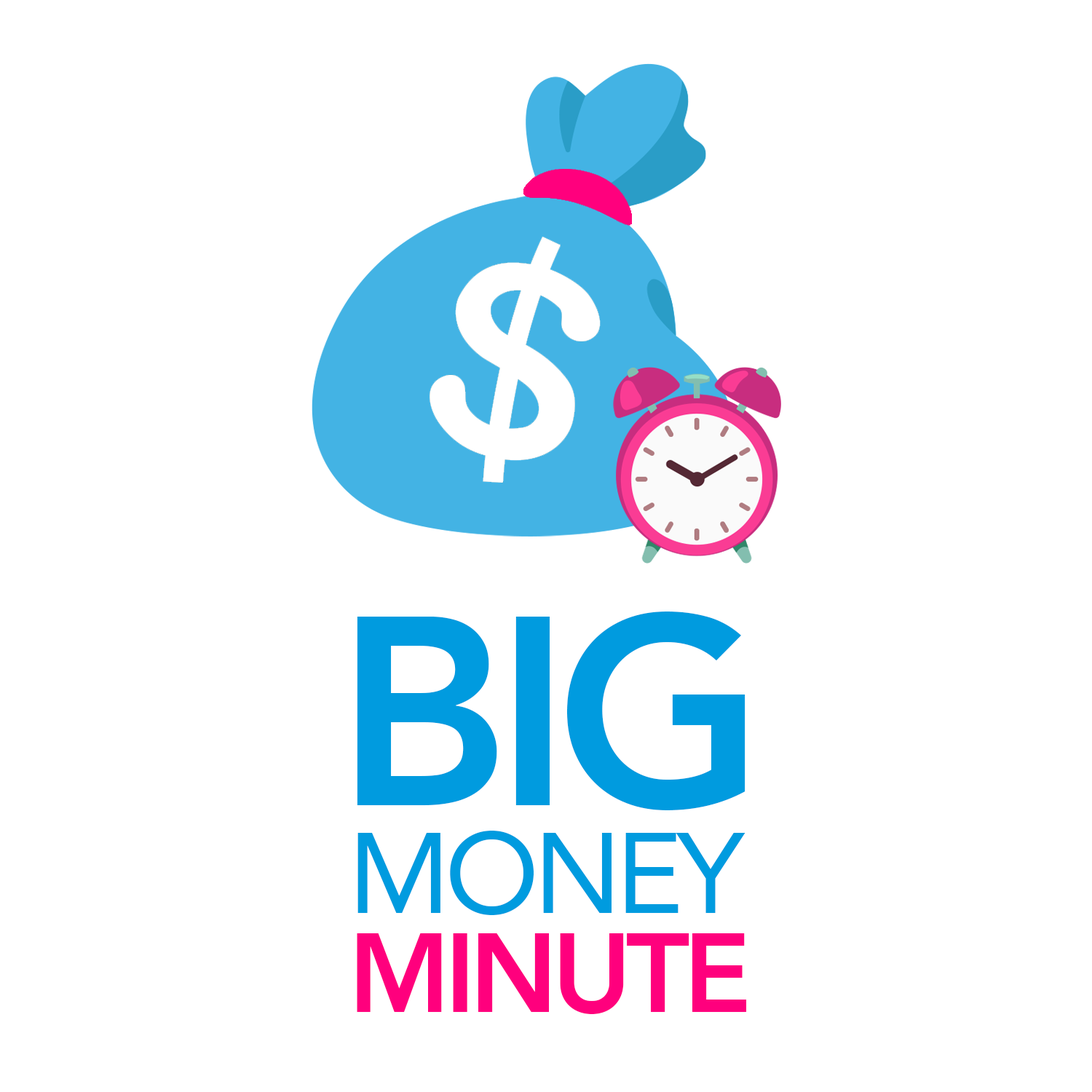
<style>
.page{position:relative;width:1092px;height:1092px;background:#ffffff}
.page>*{position:absolute;margin:0}
.t1{font:266.3px "Avenir-Heavy";letter-spacing:-0.05em;color:#009bdf}
.t2{font:113px "Avenir-Roman";letter-spacing:-0.05em;color:#009bdf}
.t3{font:110.3px "Avenir-Heavy";letter-spacing:-0.05em;color:#ff007d}
</style>
<div class="page">
<p class="t1" style="left:357px;top:612px;width:388px;height:198px">BIG</p>
<p class="t2" style="left:357px;top:831px;width:388px;height:84px">MONEY</p>
<p class="t3" style="left:357px;top:933px;width:390px;height:81px">MINUTE</p>
</div>
